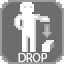
<style>
.page{position:relative;width:64px;height:64px;background:#6d6d6d}
.page>*{position:absolute;margin:0}
.t1{font:12px "MyriadPro-Regular";color:#ffffff}
</style>
<div class="page">
<p class="t1" style="left:18px;top:53px;width:29px;height:9px">DROP</p>
</div>
